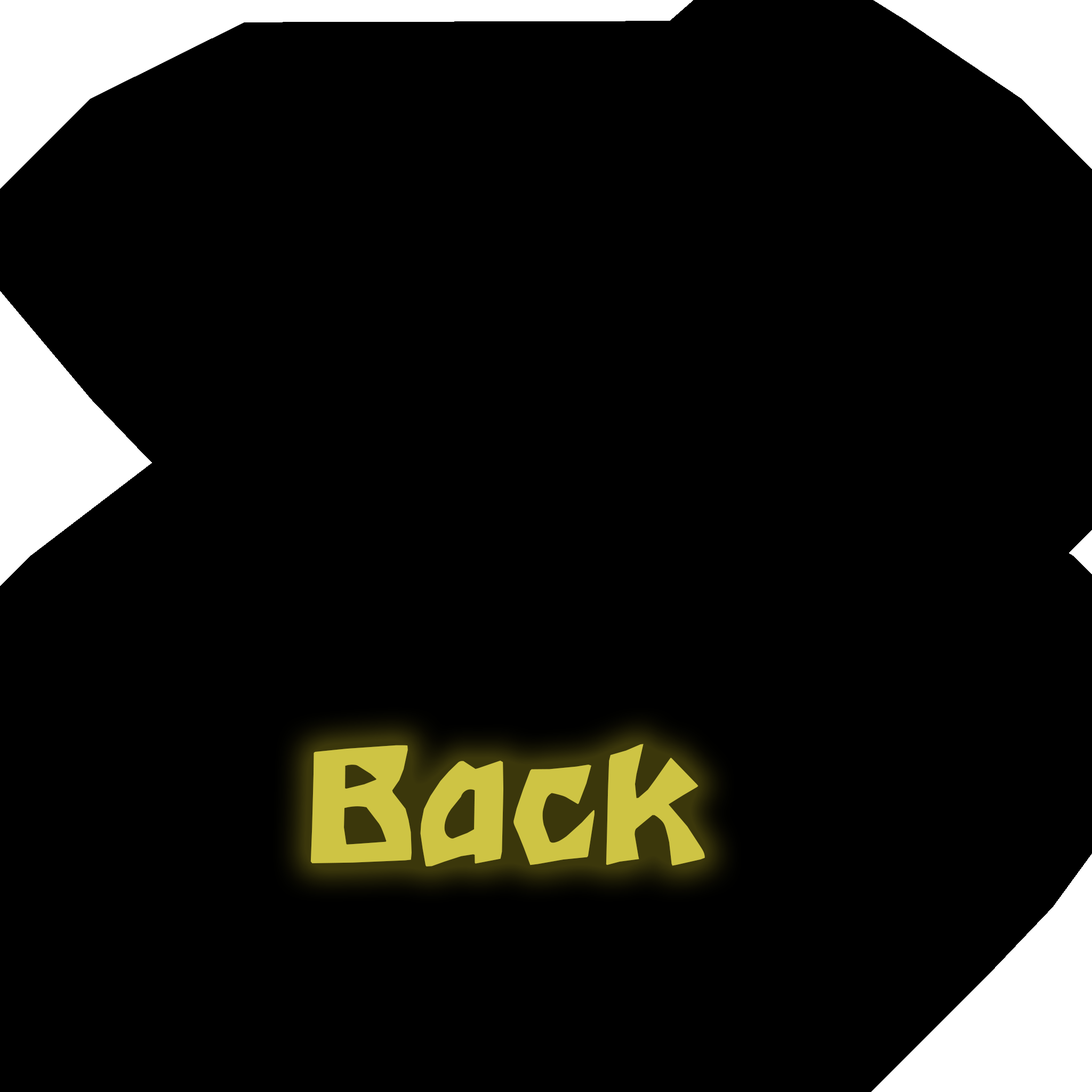
<style>
.page{position:relative;width:1092px;height:1092px;background:#000000}
.page>*{position:absolute;margin:0}
.t1{font:160px "Tarzan";color:#cec444}
</style>
<div class="page">
<p class="t1" style="left:310px;top:744px;width:395px;height:122px">Back</p>
</div>
